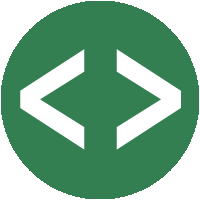
<style>
.page{position:relative;width:200px;height:200px;background:#347f51}
.page>*{position:absolute;margin:0}
.t1{font:166px "SourceCodePro-Bold";color:#ffffff}
</style>
<div class="page">
<p class="t1" style="left:20px;top:49px;width:161px;height:101px">&lt;&gt;</p>
</div>
